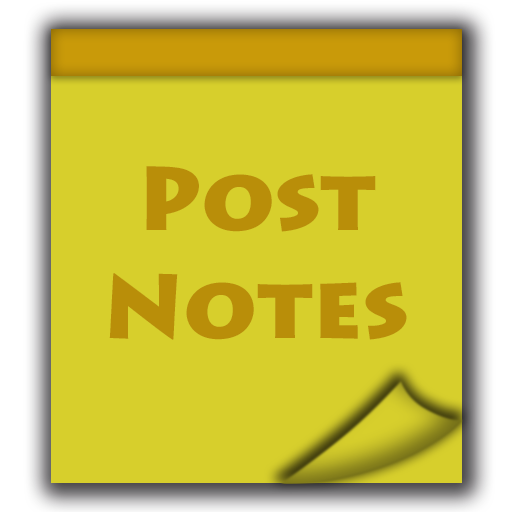
<style>
.page{position:relative;width:512px;height:512px;background:#d7cf2c}
.page>*{position:absolute;margin:0}
.t1{font:90px "LithosPro-Black";color:#b98e09}
</style>
<div class="page">
<p class="t1" style="left:109px;top:166px;width:298px;height:174px;text-align:center">Post<br>Notes</p>
</div>
